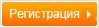
<style>
.page{position:relative;width:99px;height:28px}
.page>*{position:absolute;margin:0}
.t1{font:12px "ArialMT";color:#ffffff}
</style>
<div class="page">
<p class="t1" style="left:10px;top:9px;width:70px;height:11px">Регистрация</p>
</div>
